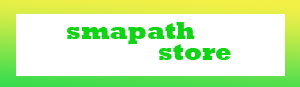
<style>
.page{position:relative;width:300px;height:87px;background:#ffffff}
.page>*{position:absolute;margin:0}
.t1{font:24px "Rockwell-ExtraBold";color:#10d414}
</style>
<div class="page">
<p class="t1" style="left:67px;top:22px;width:128px;height:22px">smapath</p>
<p class="t1" style="left:159px;top:44px;width:72px;height:16px">store</p>
</div>
